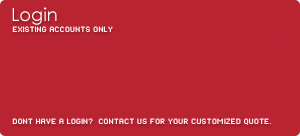
<style>
.page{position:relative;width:300px;height:136px;background:#b92431}
.page>*{position:absolute;margin:0}
.t1{font:18px "CenturyGothic";color:#ffffff}
.t2{font:11px "HaxrCorp 4088 Caps";color:#ffffff}
</style>
<div class="page">
<p class="t1" style="left:12px;top:7px;width:45px;height:18px">Login</p>
<p class="t2" style="left:12px;top:26px;width:101px;height:6px">existing accounts only</p>
<p class="t2" style="left:12px;top:118px;width:259px;height:7px">dont have a login?  contact us for your customized quote.</p>
</div>
